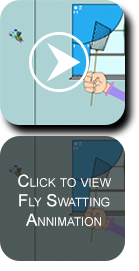
<style>
.page{position:relative;width:139px;height:271px}
.page>*{position:absolute;margin:0}
.t1{font:16.7px/19.4px "ArialMT";color:#ffffff;font-variant:small-caps}
</style>
<div class="page">
<p class="t1" style="left:18px;top:174px;width:93px;height:52px;text-align:center">Click to view <br>Fly Swatting Annimation</p>
</div>
